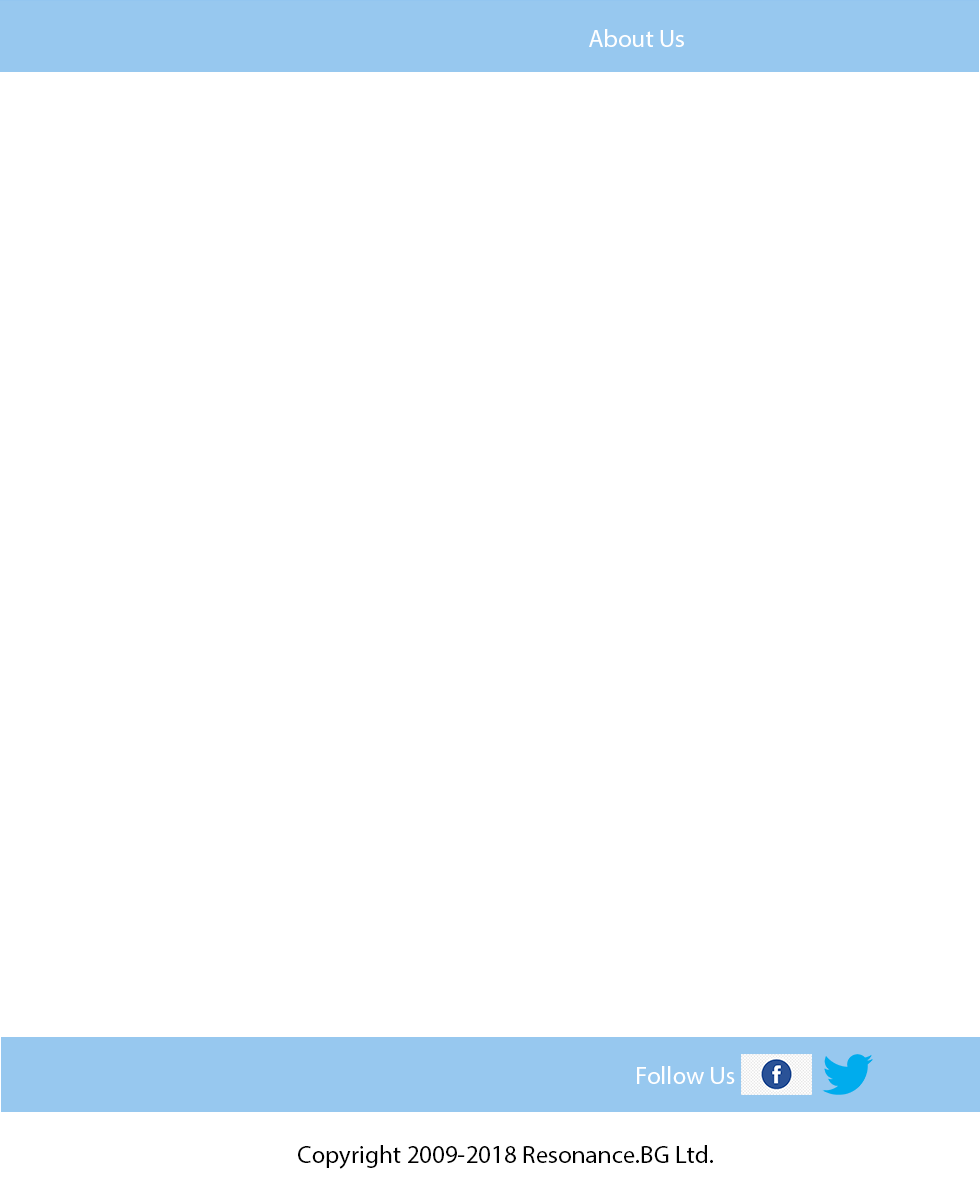
<style>
.page{position:relative;width:980px;height:1200px;background:#ffffff}
.page>*{position:absolute;margin:0}
.t1{font:25px "MyriadPro-Regular";color:#ffffff}
.t2{font:25px "MyriadPro-Regular";color:#000000}
</style>
<div class="page">
<p class="t1" style="left:589px;top:29px;width:95px;height:18px">About Us</p>
<p class="t1" style="left:637px;top:1066px;width:98px;height:18px">Follow Us</p>
<p class="t2" style="left:298px;top:1145px;width:415px;height:24px">Copyright 2009-2018 Resonance.BG Ltd.</p>
</div>
